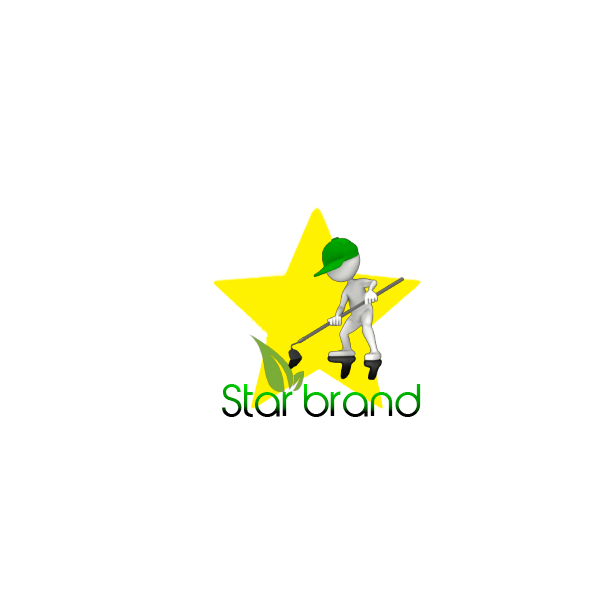
<style>
.page{position:relative;width:600px;height:600px;background:#ffffff}
.page>*{position:absolute;margin:0}
.t1{font:41.8px "UTM-AbeatbyKai"}
</style>
<div class="page">
<p class="t1" style="left:222px;top:384px;width:199px;height:33px">Star brand</p>
</div>
